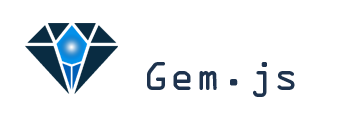
<style>
.page{position:relative;width:350px;height:120px;background:#ffffff}
.page>*{position:absolute;margin:0}
.t1{font:36px "OCRAStd";color:#1e334e}
</style>
<div class="page">
<p class="t1" style="left:147px;top:62px;width:148px;height:35px">Gem.js</p>
</div>
